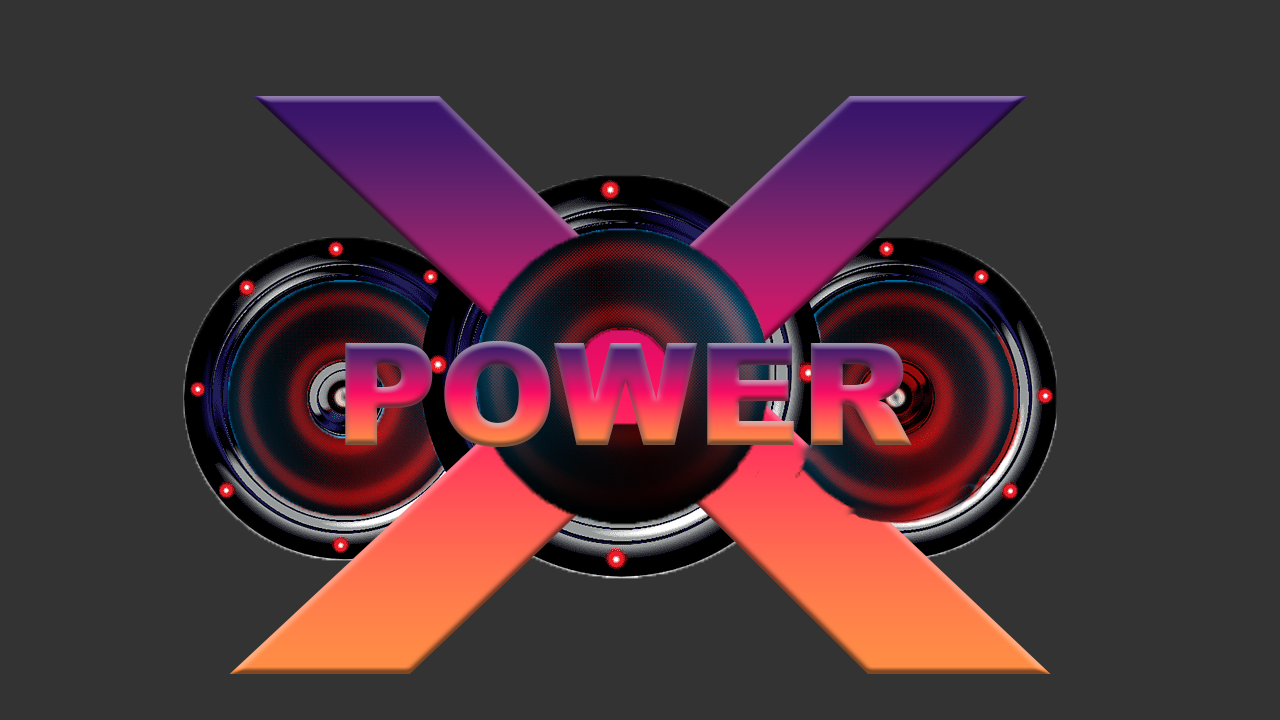
<style>
.page{position:relative;width:1280px;height:720px;background:#333333}
.page>*{position:absolute;margin:0}
.t1{font:1113.9px "ArialMT";scale:1.52 1}
.t2{font:142.7px "Arial-Black"}
</style>
<div class="page">
<p class="t1" style="left:229px;top:96px;width:822px;height:578px">x</p>
<p class="t2" style="left:345px;top:341px;width:567px;height:106px">POWER</p>
</div>
